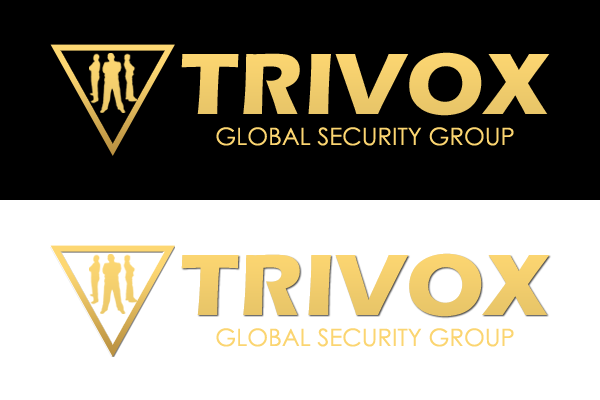
<style>
.page{position:relative;width:600px;height:400px;background:#000000}
.page>*{position:absolute;margin:0}
.t1{font:90px "ErasITC-Bold";letter-spacing:0.02em;color:#fbd571}
.t2{font:24px "CenturyGothic";color:#fbd571}
</style>
<div class="page">
<p class="t1" style="left:181px;top:52px;width:369px;height:64px">TRIVOX</p>
<p class="t2" style="left:216px;top:127px;width:298px;height:19px">GLOBAL SECURITY GROUP</p>
<p class="t1" style="left:181px;top:253px;width:369px;height:64px">TRIVOX</p>
<p class="t2" style="left:216px;top:328px;width:298px;height:19px">GLOBAL SECURITY GROUP</p>
</div>
